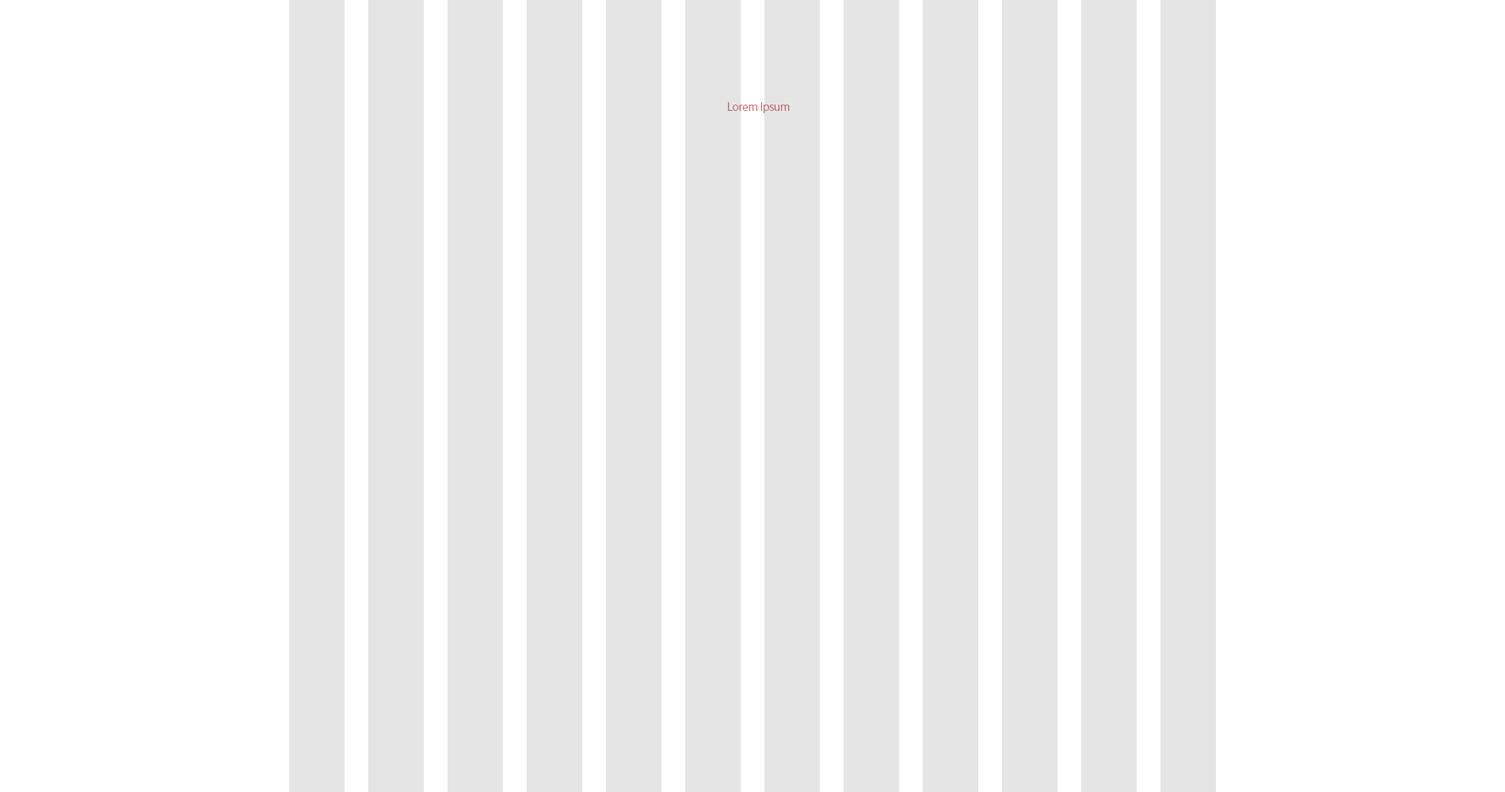
<style>
.page{position:relative;width:1505px;height:792px;background:#ffffff}
.page>*{position:absolute;margin:0}
.t1{font:11.1px "NotoSansKR-Light";letter-spacing:-0.025em;color:#cc6a6a}
</style>
<div class="page">
<p class="t1" style="left:728px;top:102px;width:62px;height:11px">Lorem Ipsum</p>
</div>
